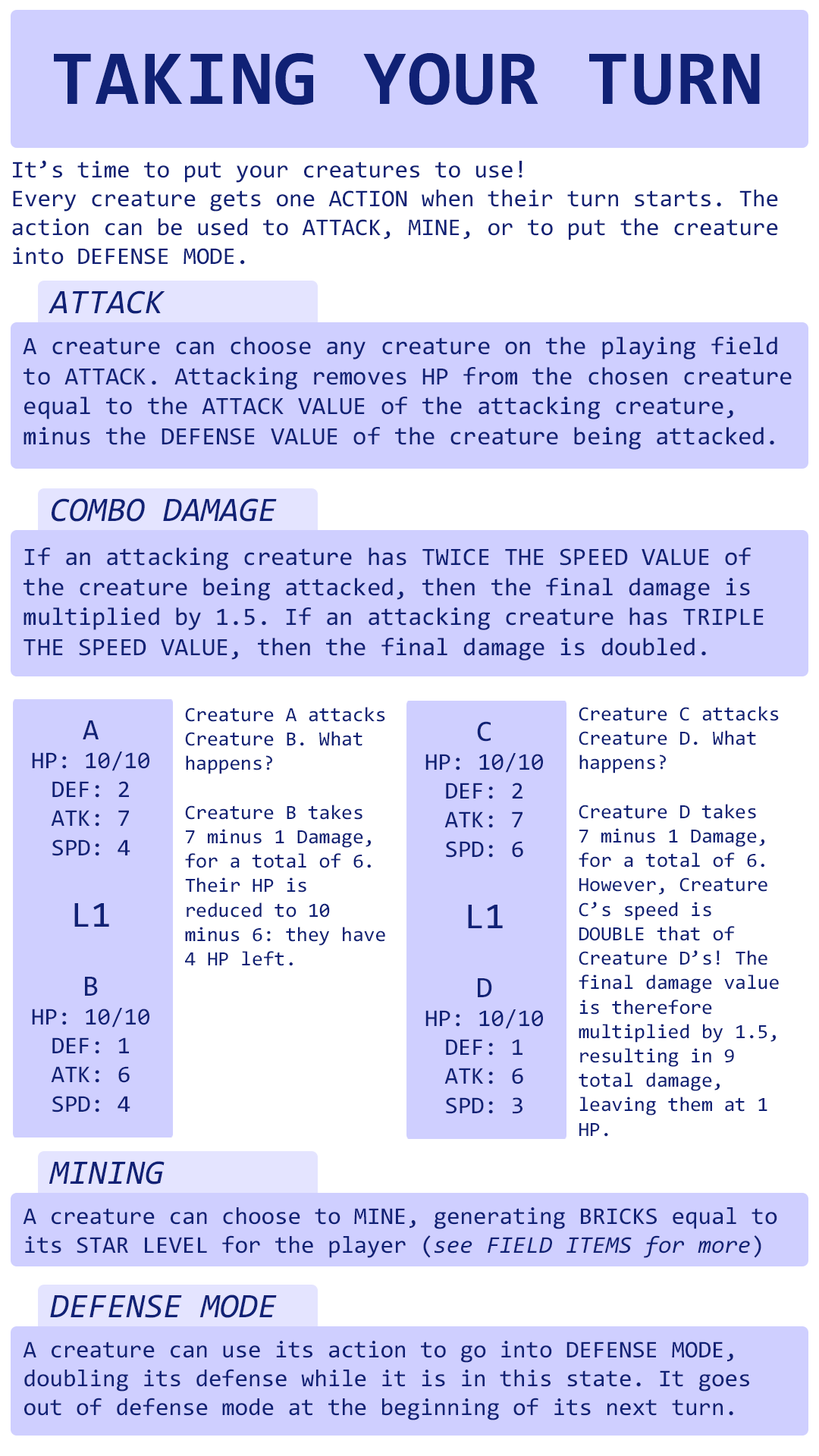
<style>
.page{position:relative;width:819px;height:1456px;background:#cfcfff}
.page>*{position:absolute;margin:0}
.t1{font:78.3px "Consolas-Bold";letter-spacing:0.02em;color:#102175}
.t2{font:24.1px "Consolas";color:#102175}
.t3{font:34.3px "Consolas-Italic";color:#102175}
.t4{font:25px "Consolas";color:#102175}
.t5{font:20.4px "Consolas";color:#102175}
.t6{font:29.6px "Consolas";color:#102175}
.t7{font:37px "Consolas";color:#102175}
.t8{font:24.1px "Consolas-Italic";color:#102175}
</style>
<div class="page">
<p class="t1" style="left:54px;top:53px;width:706px;height:52px">TAKING YOUR TURN</p>
<p class="t2" style="left:12px;top:160px;width:766px;height:105px">It’s time to put your creatures to use!<br>Every creature gets one ACTION when their turn starts. The action can be used to ATTACK, MINE, or to put the creature into DEFENSE MODE.</p>
<p class="t3" style="left:49px;top:290px;width:116px;height:24px">ATTACK</p>
<p class="t4" style="left:23px;top:337px;width:769px;height:113px">A creature can choose any creature on the playing field to ATTACK. Attacking removes HP from the chosen creature equal to the ATTACK VALUE of the attacking creature, minus the DEFENSE VALUE of the creature being attacked.</p>
<p class="t3" style="left:52px;top:498px;width:225px;height:24px">COMBO DAMAGE</p>
<p class="t4" style="left:24px;top:548px;width:740px;height:112px">If an attacking creature has TWICE THE SPEED VALUE of the creature being attacked, then the final damage is multiplied by 1.5. If an attacking creature has TRIPLE THE SPEED VALUE, then the final damage is doubled.</p>
<p class="t5" style="left:185px;top:707px;width:200px;height:259px">Creature A attacks Creature B. What happens?<br><br>Creature B takes <br>7 minus 1 Damage, for a total of 6. Their HP is reduced to 10 minus 6: they have 4 HP left.</p>
<p class="t5" style="left:579px;top:706px;width:200px;height:431px">Creature C attacks Creature D. What happens?<br><br>Creature D takes <br>7 minus 1 Damage, for a total of 6. However, Creature C’s speed is DOUBLE that of Creature D’s! The final damage value is therefore multiplied by 1.5, resulting in 9 total damage, leaving them at 1 HP.</p>
<p class="t2" style="left:32px;top:720px;width:117px;height:136px;text-align:center"><span class="t6">A<br></span>HP: 10/10<br>DEF: 2<br>ATK: 7<br>SPD: 4</p>
<p class="t2" style="left:425px;top:721px;width:118px;height:137px;text-align:center"><span class="t6">C<br></span>HP: 10/10<br>DEF: 2<br>ATK: 7<br>SPD: 6</p>
<p class="t7" style="left:74px;top:903px;width:35px;height:24px">L1</p>
<p class="t7" style="left:468px;top:905px;width:35px;height:23px">L1</p>
<p class="t2" style="left:32px;top:977px;width:117px;height:135px;text-align:center"><span class="t6">B<br></span>HP: 10/10<br>DEF: 1<br>ATK: 6<br>SPD: 4</p>
<p class="t2" style="left:425px;top:978px;width:118px;height:136px;text-align:center"><span class="t6">D<br></span>HP: 10/10<br>DEF: 1<br>ATK: 6<br>SPD: 3</p>
<p class="t3" style="left:49px;top:1161px;width:116px;height:24px">MINING</p>
<p class="t2" style="left:23px;top:1207px;width:754px;height:51px">A creature can choose to MINE, generating BRICKS equal to its STAR LEVEL for the player (<span class="t8">see FIELD ITEMS for more</span>)</p>
<p class="t3" style="left:50px;top:1294px;width:227px;height:24px">DEFENSE MODE</p>
<p class="t2" style="left:23px;top:1341px;width:726px;height:79px">A creature can use its action to go into DEFENSE MODE, doubling its defense while it is in this state. It goes out of defense mode at the beginning of its next turn.</p>
</div>
